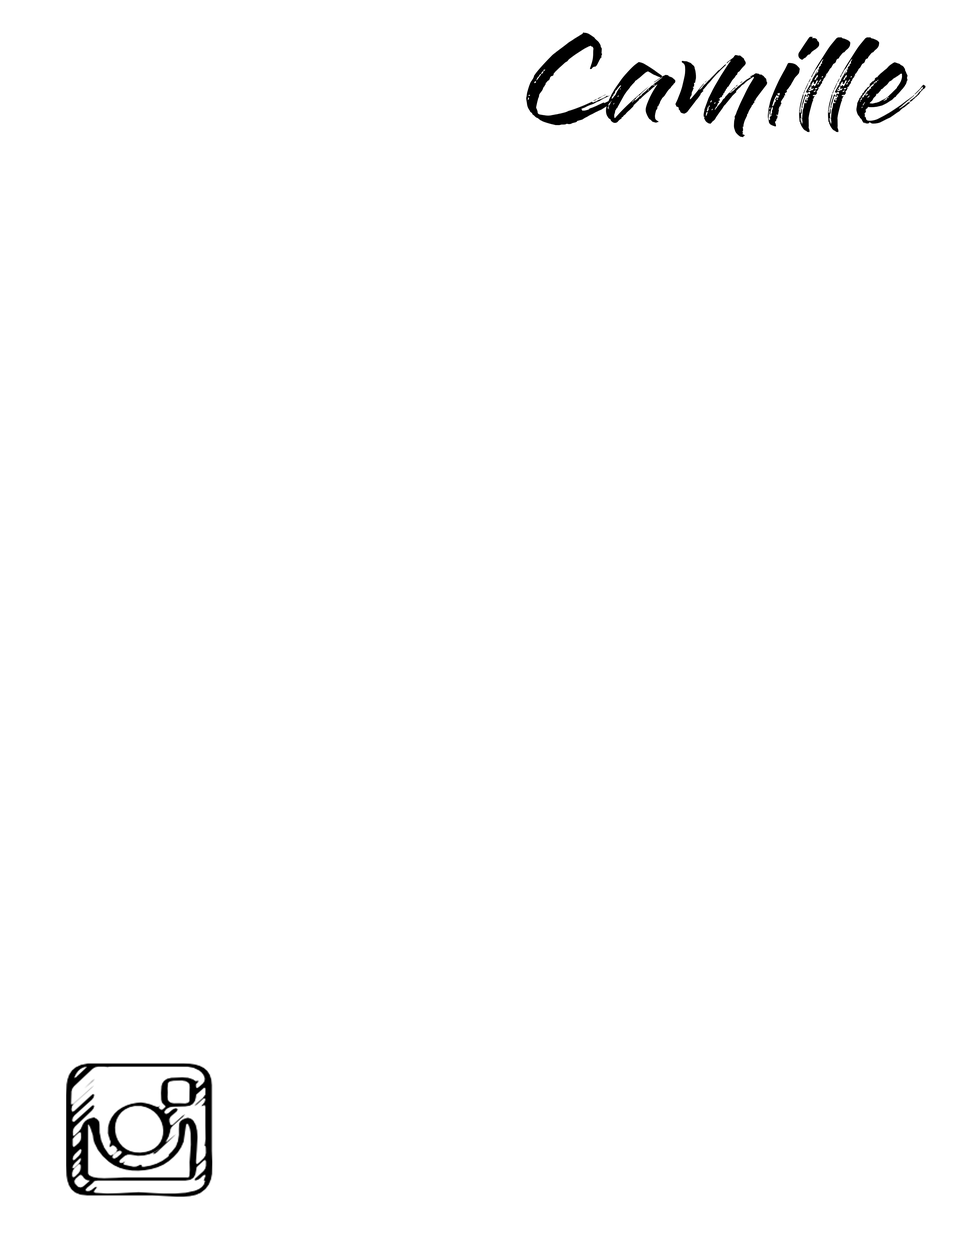
<style>
.page{position:relative;width:956px;height:1247px;background:#ffffff}
.page>*{position:absolute;margin:0}
.t1{font:87.6px "GlossAndBloom";color:#000000;scale:1.27 1}
</style>
<div class="page">
<p class="t1" style="left:526px;top:32px;width:400px;height:105px">Camille</p>
</div>
